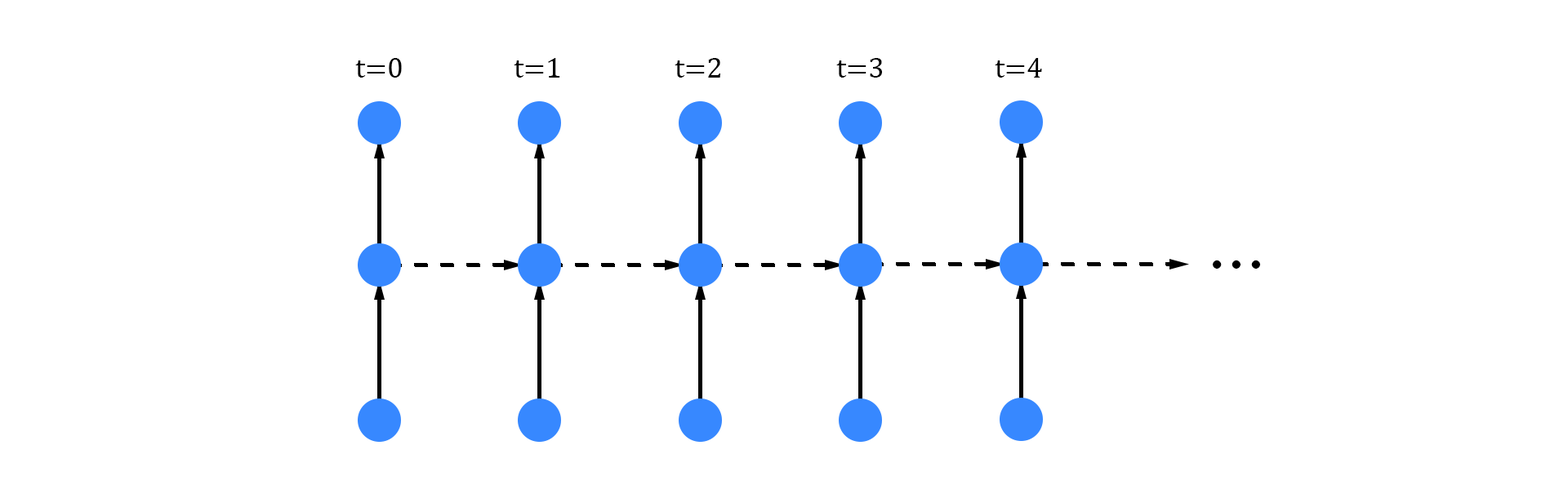
<style>
.page{position:relative;width:1568px;height:490px;background:#ffffff}
.page>*{position:absolute;margin:0}
.t1{font:29.4px "CambriaMath";color:#000000}
.t2{font:58.8px "AdobeHeitiStd-Regular";color:#000000}
</style>
<div class="page">
<p class="t1" style="left:355px;top:58px;width:47px;height:20px">t=0</p>
<p class="t1" style="left:514px;top:58px;width:46px;height:20px">t=1</p>
<p class="t1" style="left:675px;top:58px;width:45px;height:20px">t=2</p>
<p class="t1" style="left:836px;top:58px;width:46px;height:20px">t=3</p>
<p class="t1" style="left:995px;top:58px;width:47px;height:20px">t=4</p>
<p class="t2" style="left:1213px;top:260px;width:47px;height:9px">…</p>
</div>
